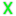
<style>
.page{position:relative;width:16px;height:16px;background:#ffffff}
.page>*{position:absolute;margin:0}
.t1{font:16.1px "Tahoma";color:#00ff12}
</style>
<div class="page">
<p class="t1" style="left:3px;top:2px;width:10px;height:12px">X</p>
</div>
